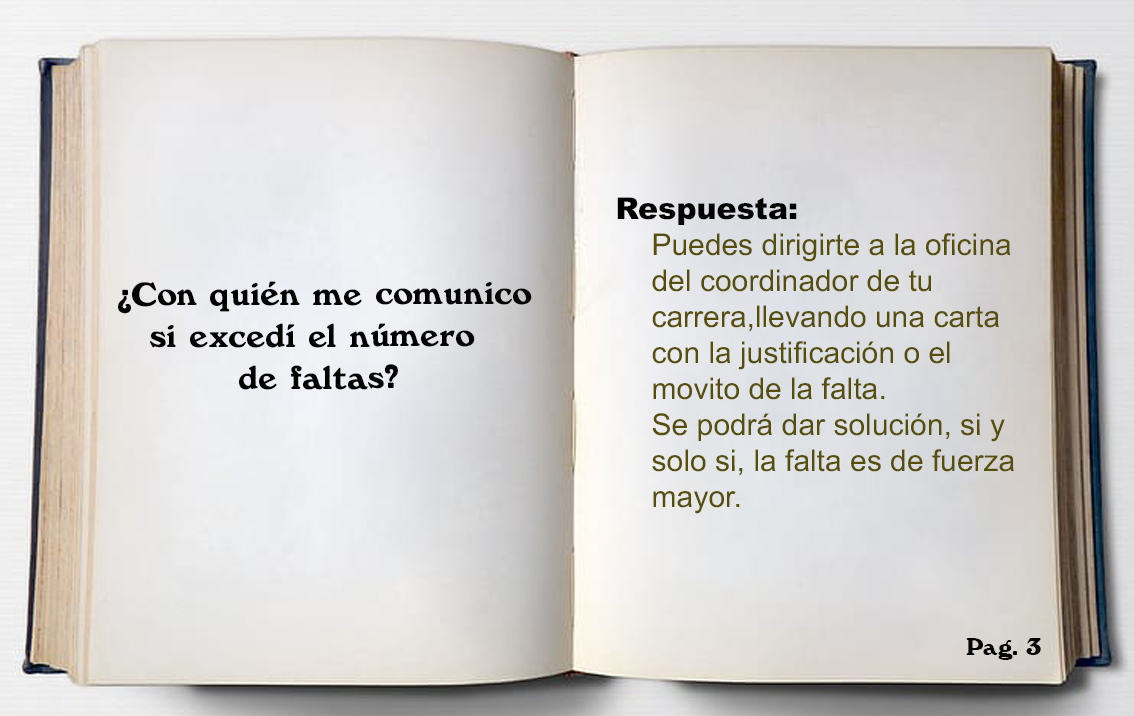
<style>
.page{position:relative;width:1134px;height:716px}
.page>*{position:absolute;margin:0}
.t1{font:30px "ArialMT";color:#564e09}
.t2{font:30px "Arial-Black";color:#020202}
.t3{font:35px "Windsor-Regular";color:#020202}
.t4{font:25px "Windsor-Regular";color:#040404}
</style>
<div class="page">
<p class="t1" style="left:617px;top:197px;width:397px;height:317px"><span class="t2">Respuesta: <br>  </span>Puedes dirigirte a la oficina <br> del coordinador de tu <br> carrera,llevando una carta <br> con la justificación o el <br> movito de la falta.<br> Se podrá dar solución, si y <br> solo si, la falta es de fuerza<br> mayor.</p>
<p class="t3" style="left:118px;top:281px;width:414px;height:109px;text-align:center">¿Con quién me comunico <br>si excedí el número <br>de faltas?</p>
<p class="t4" style="left:966px;top:638px;width:75px;height:22px">Pag. 3</p>
</div>
